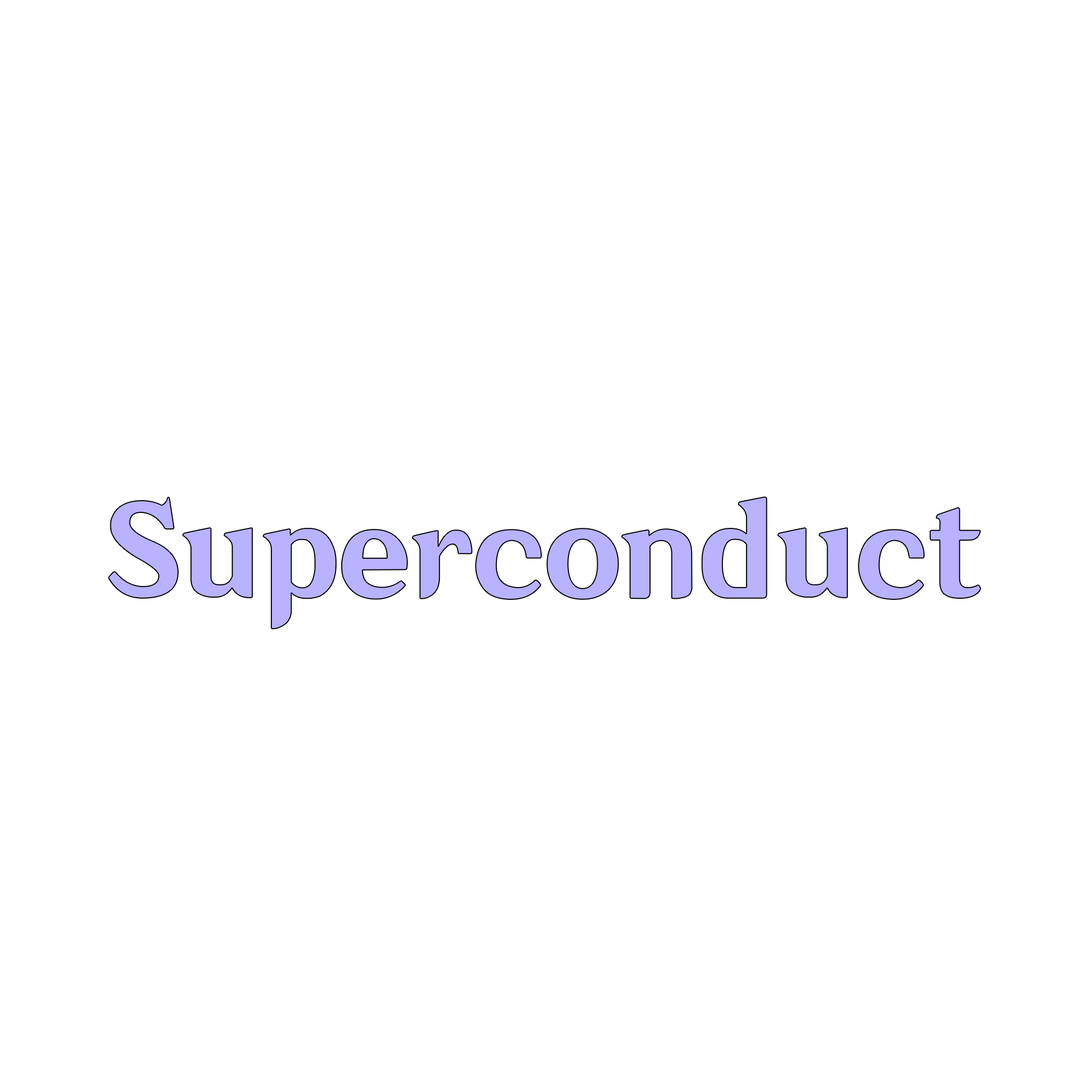
<style>
.page{position:relative;width:1092px;height:1092px;background:#ffffff}
.page>*{position:absolute;margin:0}
.t1{font:122.2px "Default_SC-85W";color:#b9b2ff}
</style>
<div class="page">
<p class="t1" style="left:109px;top:497px;width:872px;height:132px">Superconduct</p>
</div>
